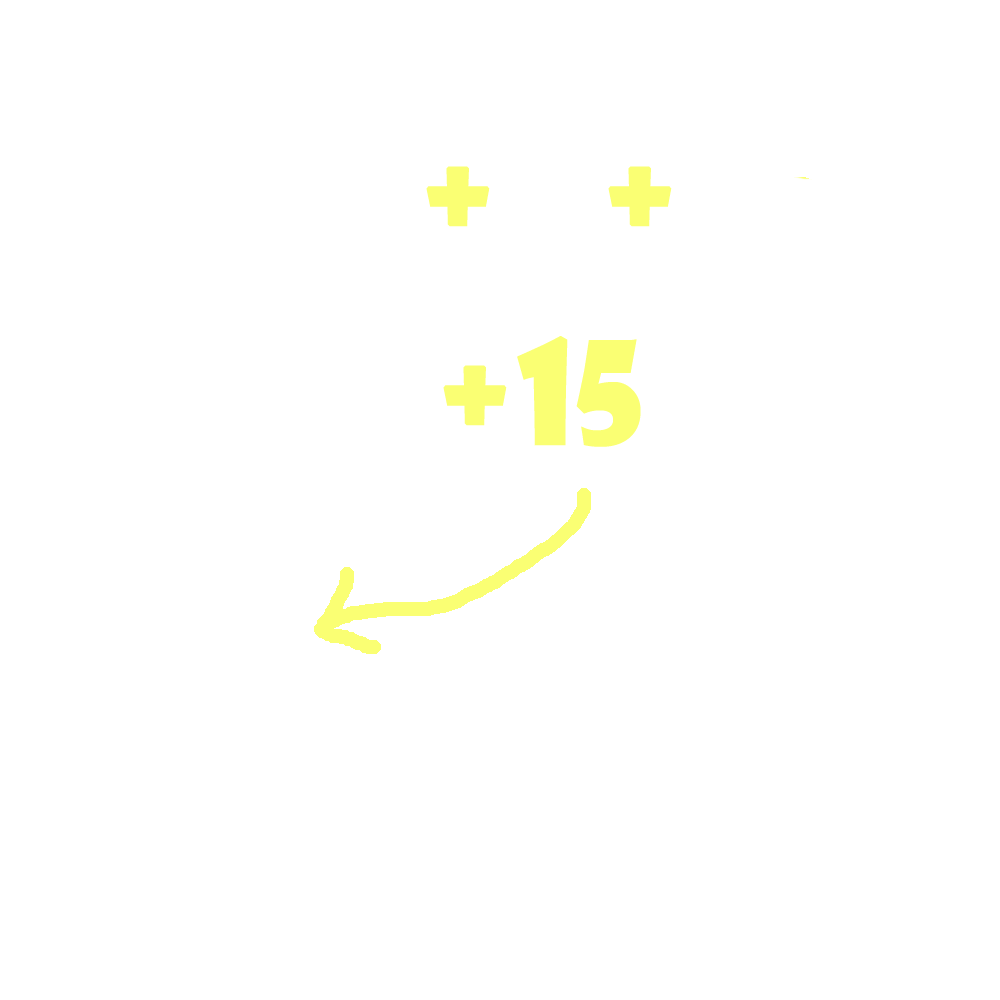
<style>
.page{position:relative;width:1000px;height:1000px;background:#ffffff}
.page>*{position:absolute;margin:0}
.t1{font:140px "ShowcardGothic-Reg";color:#faff73;font-weight:bold}
.t2{font:140px "ShowcardGothic-Reg";color:#faff73}
</style>
<div class="page">
<p class="t1" style="left:426px;top:166px;width:64px;height:61px">+</p>
<p class="t1" style="left:608px;top:166px;width:64px;height:61px">+</p>
<p class="t2" style="left:443px;top:336px;width:198px;height:111px"><span class="t1">+</span>15</p>
</div>
